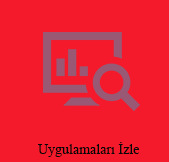
<style>
.page{position:relative;width:169px;height:162px;background:#f4192b}
.page>*{position:absolute;margin:0}
.t1{font:14px "TimesNewRomanPSMT";color:#060606}
</style>
<div class="page">
<p class="t1" style="left:38px;top:142px;width:102px;height:15px">Uygulamaları İzle</p>
</div>
